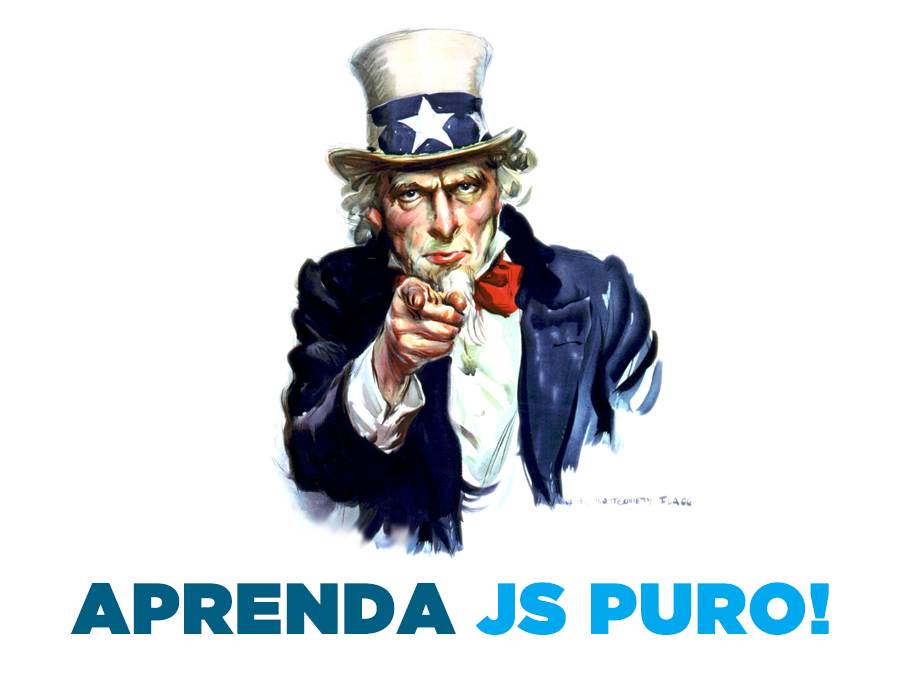
<style>
.page{position:relative;width:900px;height:700px;background:#ffffff}
.page>*{position:absolute;margin:0}
.t1{font:71.4px "GothamUltra";color:#00a9ee;font-weight:bold}
.t2{font:71.4px "GothamUltra";color:#005e83;font-weight:bold}
</style>
<div class="page">
<p class="t1" style="left:71px;top:582px;width:758px;height:53px"><span class="t2">APRENDA </span>JS PURO!</p>
</div>
